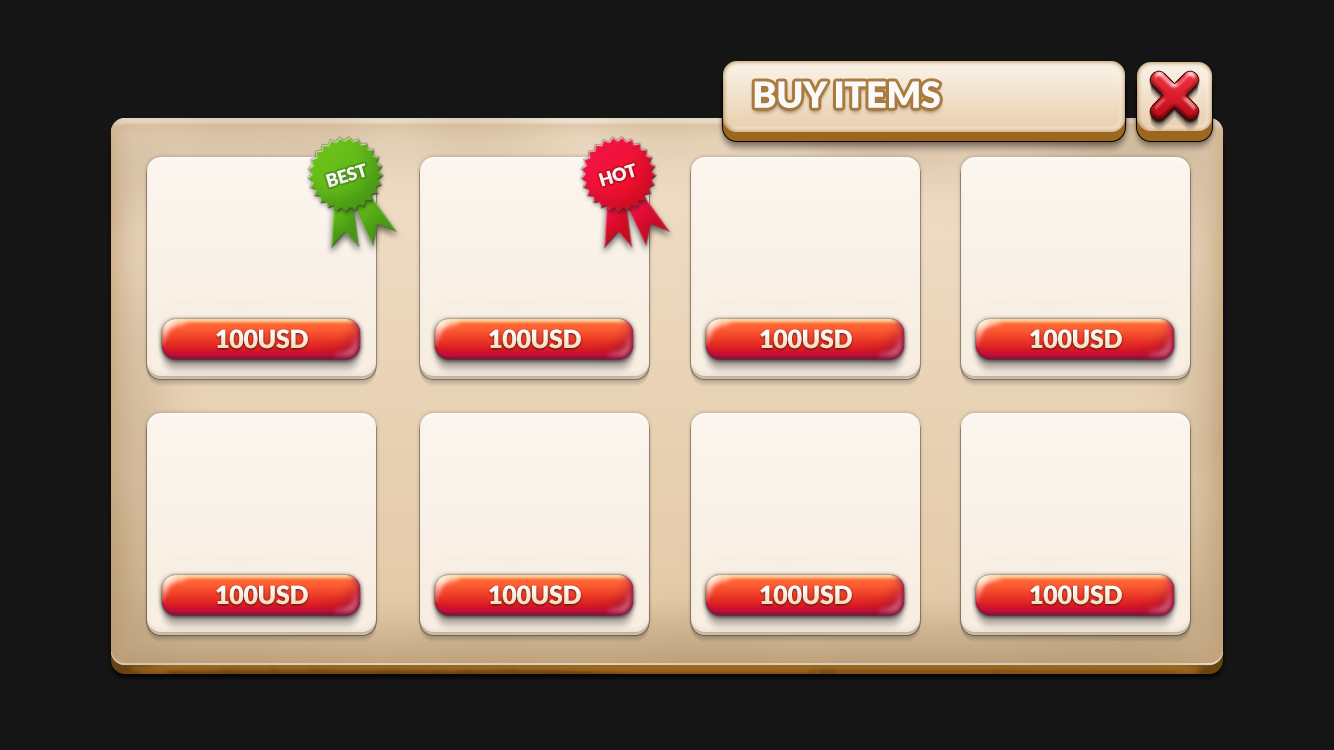
<style>
.page{position:relative;width:1334px;height:750px;background:#161515}
.page>*{position:absolute;margin:0}
.t1{font:36.2px "Lato-Black";letter-spacing:-0.01em;color:#fbfafa}
.t2{font:17.7px "Lato-Black";letter-spacing:-0.01em;color:#f9f7f8}
.t3{font:24.9px "Lato-Black";letter-spacing:-0.01em}
</style>
<div class="page">
<p class="t1" style="left:754px;top:81px;width:186px;height:27px">BUY ITEMS</p>
<p class="t2" style="left:325px;top:163px;width:41px;height:25px;rotate:-17deg">BEST</p>
<p class="t2" style="left:598px;top:163px;width:37px;height:24px;rotate:-17deg">HOT</p>
<p class="t3" style="left:216px;top:329px;width:92px;height:20px">100USD</p>
<p class="t3" style="left:489px;top:329px;width:92px;height:20px">100USD</p>
<p class="t3" style="left:760px;top:329px;width:92px;height:20px">100USD</p>
<p class="t3" style="left:1030px;top:329px;width:92px;height:20px">100USD</p>
<p class="t3" style="left:216px;top:585px;width:92px;height:20px">100USD</p>
<p class="t3" style="left:489px;top:585px;width:92px;height:20px">100USD</p>
<p class="t3" style="left:760px;top:585px;width:92px;height:20px">100USD</p>
<p class="t3" style="left:1030px;top:585px;width:92px;height:20px">100USD</p>
</div>
